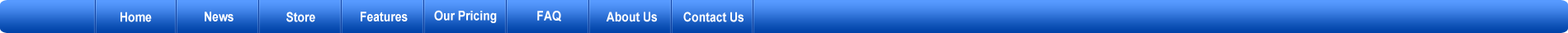
<style>
.page{position:relative;width:1568px;height:33px}
.page>*{position:absolute;margin:0}
.t1{font:13.2px "Arial-BoldMT";color:#ffffff;scale:0.87 1}
</style>
<div class="page">
<p class="t1" style="left:120px;top:12px;width:32px;height:10px">Home</p>
<p class="t1" style="left:205px;top:12px;width:29px;height:9px">News</p>
<p class="t1" style="left:286px;top:12px;width:29px;height:10px">Store</p>
<p class="t1" style="left:361px;top:12px;width:47px;height:9px">Features</p>
<p class="t1" style="left:434px;top:10px;width:63px;height:13px">Our Pricing</p>
<p class="t1" style="left:537px;top:11px;width:24px;height:10px">FAQ</p>
<p class="t1" style="left:606px;top:12px;width:51px;height:10px">About Us</p>
<p class="t1" style="left:683px;top:12px;width:61px;height:10px">Contact Us</p>
</div>
